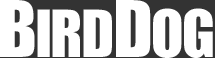
<style>
.page{position:relative;width:215px;height:58px;background:#ffffff}
.page>*{position:absolute;margin:0}
.t1{font:60px "Impact";letter-spacing:-0.025em;color:#ffffff}
.t2{font:72px "Impact";letter-spacing:-0.025em;color:#ffffff}
</style>
<div class="page">
<p class="t1" style="left:0px;top:0px;width:213px;height:58px"><span class="t2">B</span>IRD<span class="t2">D</span>OG</p>
</div>
